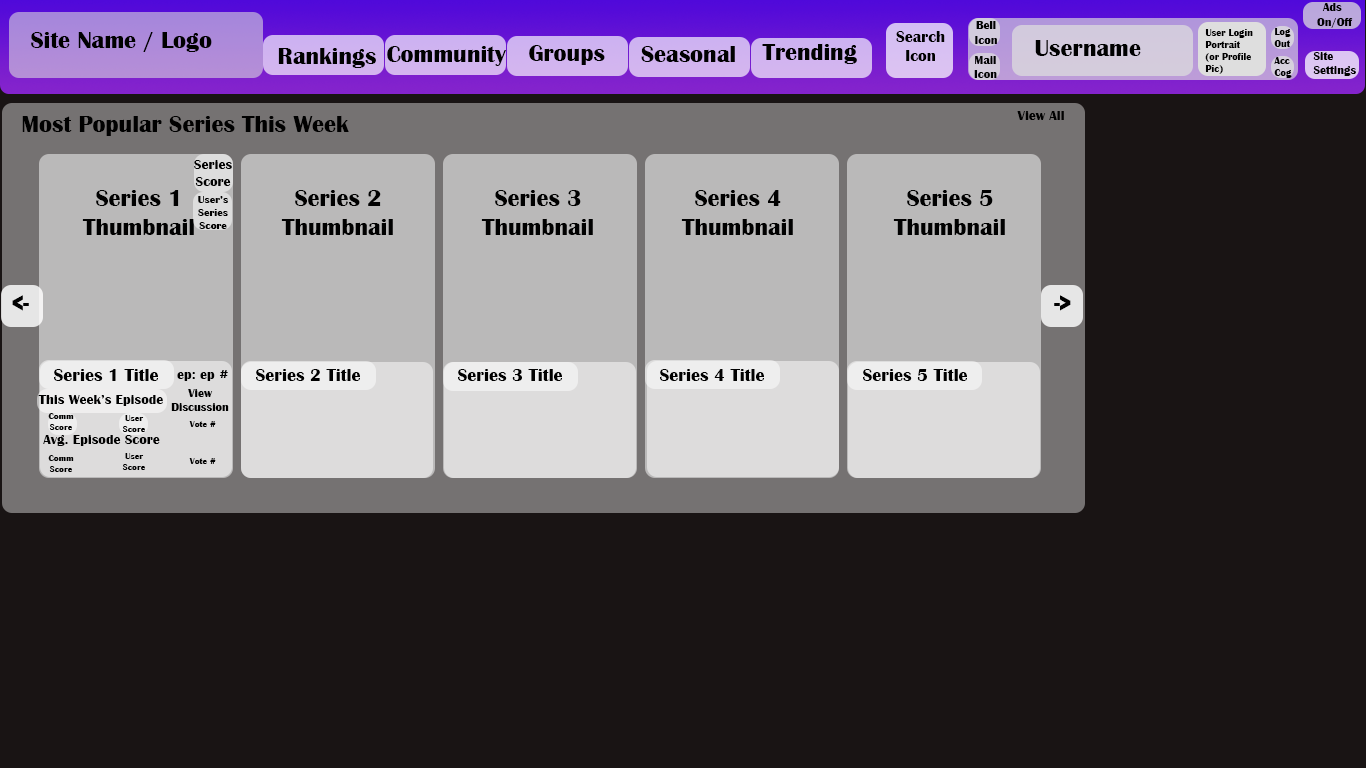
<style>
.page{position:relative;width:1366px;height:768px;background:#191414}
.page>*{position:absolute;margin:0}
.t1{font:14px "BritannicBold";color:#010101}
.t2{font:24px "BritannicBold";color:#010101}
.t3{font:11px "BritannicBold";color:#010101}
.t4{font:18px "BritannicBold";color:#010101}
.t5{font:12px "BritannicBold";color:#010101}
.t6{font:9px "BritannicBold";color:#010101}
</style>
<div class="page">
<p class="t1" style="left:1017px;top:111px;width:47px;height:9px">View All</p>
<p class="t2" style="left:22px;top:115px;width:327px;height:21px">Most Popular Series This Week</p>
<p class="t1" style="left:194px;top:160px;width:38px;height:26px;text-align:center">Series<br>Score</p>
<p class="t2" style="left:82px;top:190px;width:112px;height:45px;text-align:center">Series 1<br>Thumbnail</p>
<p class="t3" style="left:198px;top:196px;width:30px;height:33px;text-align:center">User’s<br>Series<br>Score</p>
<p class="t2" style="left:281px;top:190px;width:112px;height:45px;text-align:center">Series 2<br>Thumbnail</p>
<p class="t2" style="left:481px;top:190px;width:112px;height:45px;text-align:center">Series 3<br>Thumbnail</p>
<p class="t2" style="left:681px;top:190px;width:112px;height:45px;text-align:center">Series 4<br>Thumbnail</p>
<p class="t2" style="left:893px;top:190px;width:112px;height:45px;text-align:center">Series 5<br>Thumbnail</p>
<p class="t2" style="left:12px;top:295px;width:17px;height:16px">&lt;-</p>
<p class="t2" style="left:1054px;top:295px;width:17px;height:16px">-&gt;</p>
<p class="t4" style="left:54px;top:369px;width:104px;height:12px">Series 1 Title</p>
<p class="t1" style="left:177px;top:370px;width:51px;height:11px">ep: ep #</p>
<p class="t4" style="left:256px;top:369px;width:104px;height:12px">Series 2 Title</p>
<p class="t4" style="left:458px;top:369px;width:104px;height:12px">Series 3 Title</p>
<p class="t4" style="left:660px;top:369px;width:104px;height:12px">Series 4 Title</p>
<p class="t4" style="left:863px;top:369px;width:104px;height:12px">Series 5 Title</p>
<p class="t5" style="left:171px;top:389px;width:58px;height:22px;text-align:center">View<br>Discussion</p>
<p class="t1" style="left:38px;top:395px;width:125px;height:11px">This Week’s Episode</p>
<p class="t6" style="left:48px;top:413px;width:26px;height:17px;text-align:center">Comm<br>Score</p>
<p class="t6" style="left:122px;top:415px;width:23px;height:17px;text-align:center">User<br>Score</p>
<p class="t6" style="left:189px;top:421px;width:27px;height:6px">Vote #</p>
<p class="t1" style="left:43px;top:435px;width:117px;height:11px">Avg. Episode Score</p>
<p class="t6" style="left:48px;top:455px;width:26px;height:17px;text-align:center">Comm<br>Score</p>
<p class="t6" style="left:122px;top:453px;width:23px;height:17px;text-align:center">User<br>Score</p>
<p class="t6" style="left:189px;top:458px;width:27px;height:6px">Vote #</p>
</div>
